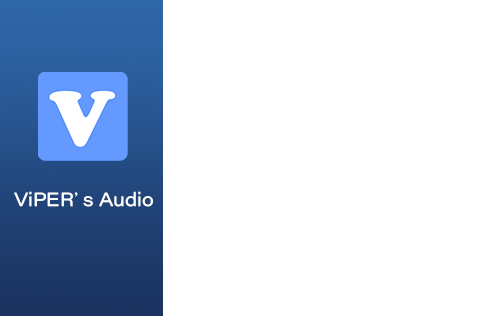
<style>
.page{position:relative;width:500px;height:316px;background:#ffffff}
.page>*{position:absolute;margin:0}
.t1{font:18.7px "AcuminConcept-Wide";color:#ffffff}
.t2{font:18.7px "DFKaiShu-SB-Estd-BF";color:#ffffff}
</style>
<div class="page">
<p class="t1" style="left:14px;top:191px;width:139px;height:16px">ViPER<span class="t2">'</span>s Audio</p>
</div>
